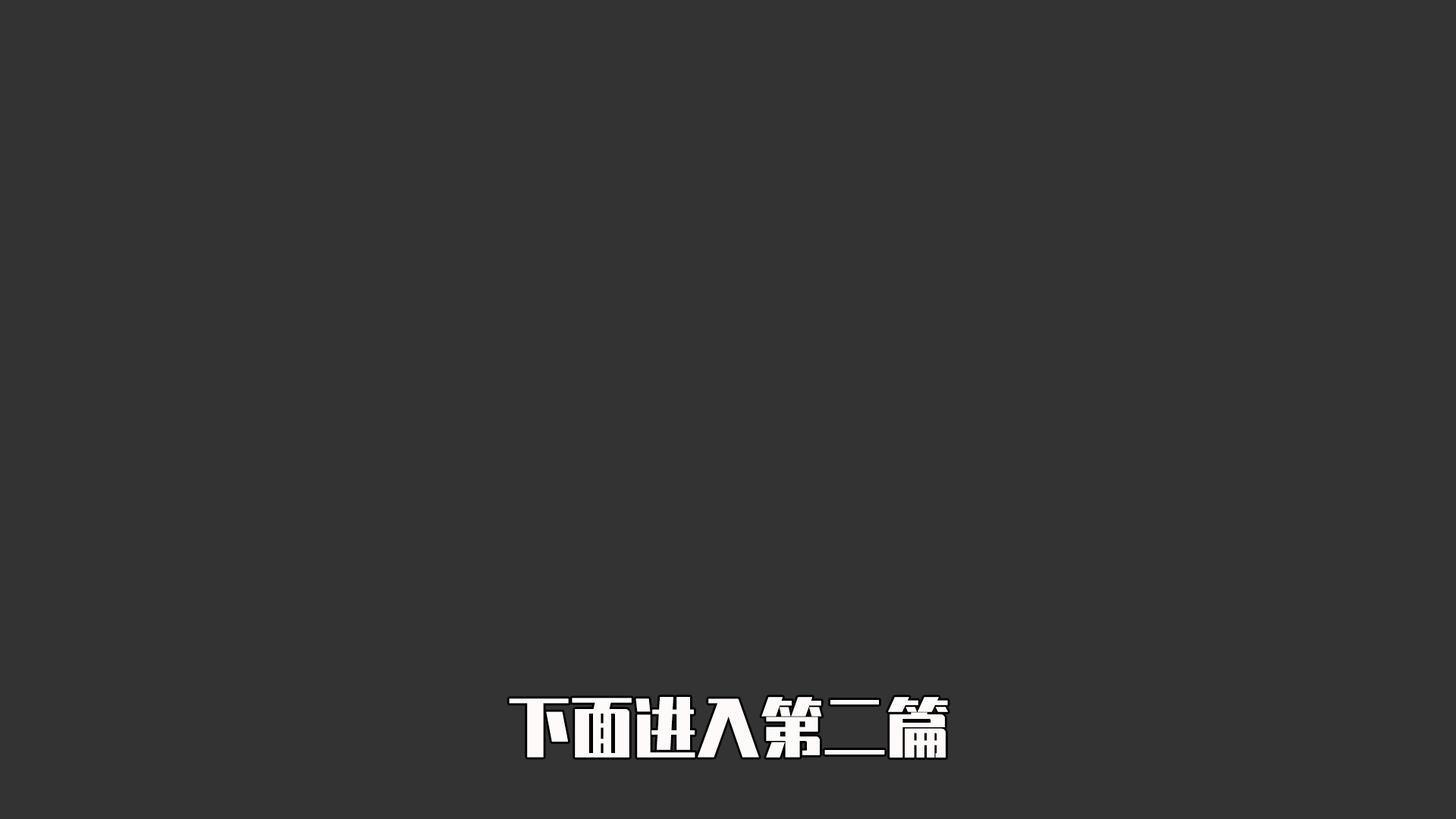
<style>
.page{position:relative;width:1456px;height:819px;background:#333333}
.page>*{position:absolute;margin:0}
.t1{font:63.2px "ZhenyanGB-Regular";color:#fefafa}
</style>
<div class="page">
<p class="t1" style="left:509px;top:697px;width:439px;height:61px">下面进入第二篇</p>
</div>
